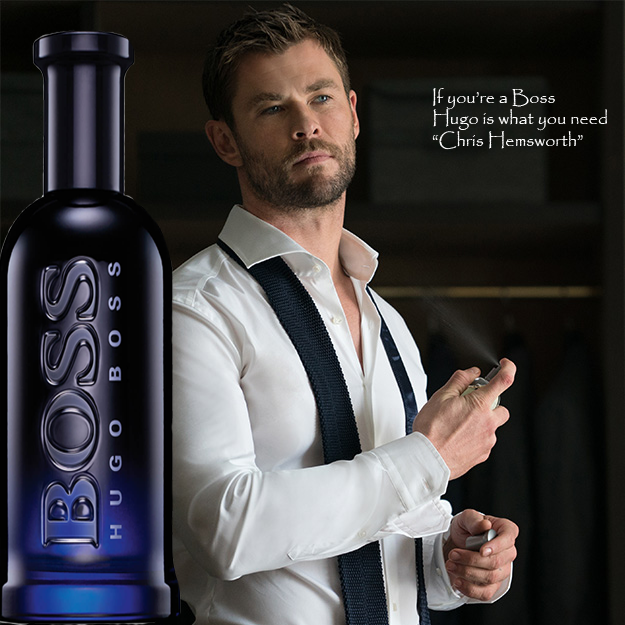
<style>
.page{position:relative;width:625px;height:625px}
.page>*{position:absolute;margin:0}
.t1{font:18px "Papyrus-Regular";color:#ffffff}
.t2{font:18px "Papyrus-Regular";color:#000000}
</style>
<div class="page">
<p class="t1" style="left:432px;top:88px;width:175px;height:62px"><span class="t2"><br></span>If you’re a Boss <br>Hugo is what you need<br>“Chris Hemsworth”</p>
</div>
